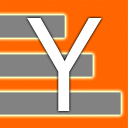
<style>
.page{position:relative;width:128px;height:128px;background:#ff6500}
.page>*{position:absolute;margin:0}
.t1{font:129.2px "ArialMT";color:#ffffff;scale:0.87 1}
</style>
<div class="page">
<p class="t1" style="left:27px;top:18px;width:75px;height:93px">Y</p>
</div>
